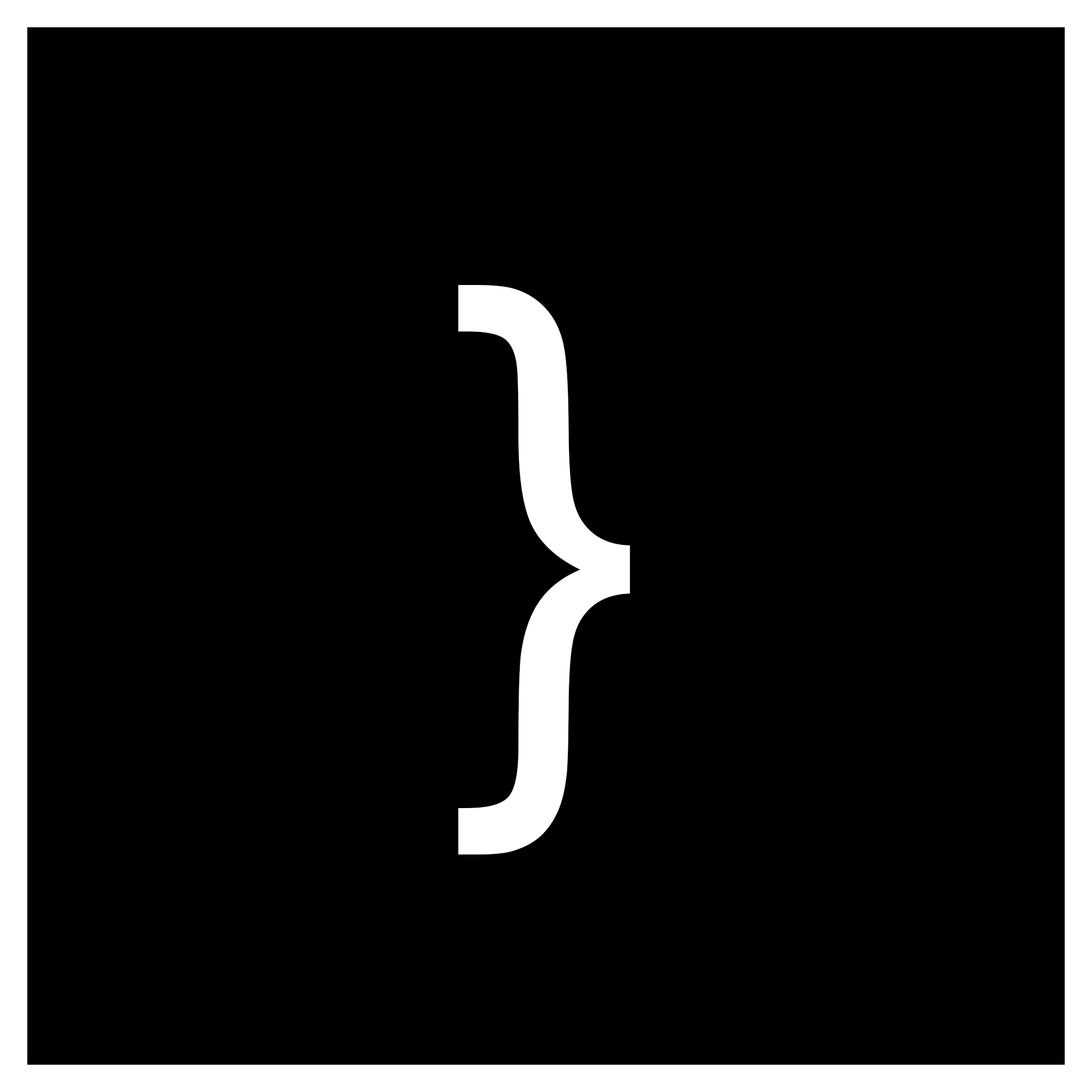
<style>
.page{position:relative;width:1092px;height:1092px;background:#000000}
.page>*{position:absolute;margin:0}
.t1{font:606.7px "ArialMT";color:#ffffff}
</style>
<div class="page">
<p class="t1" style="left:458px;top:285px;width:172px;height:569px">}</p>
</div>
